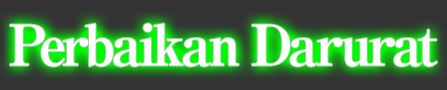
<style>
.page{position:relative;width:447px;height:90px;background:#333333}
.page>*{position:absolute;margin:0}
.t1{font:56px "RyuminPro-ExBold";letter-spacing:-0.08em;color:#ffffff}
</style>
<div class="page">
<p class="t1" style="left:10px;top:23px;width:428px;height:44px">Perbaikan Darurat</p>
</div>
